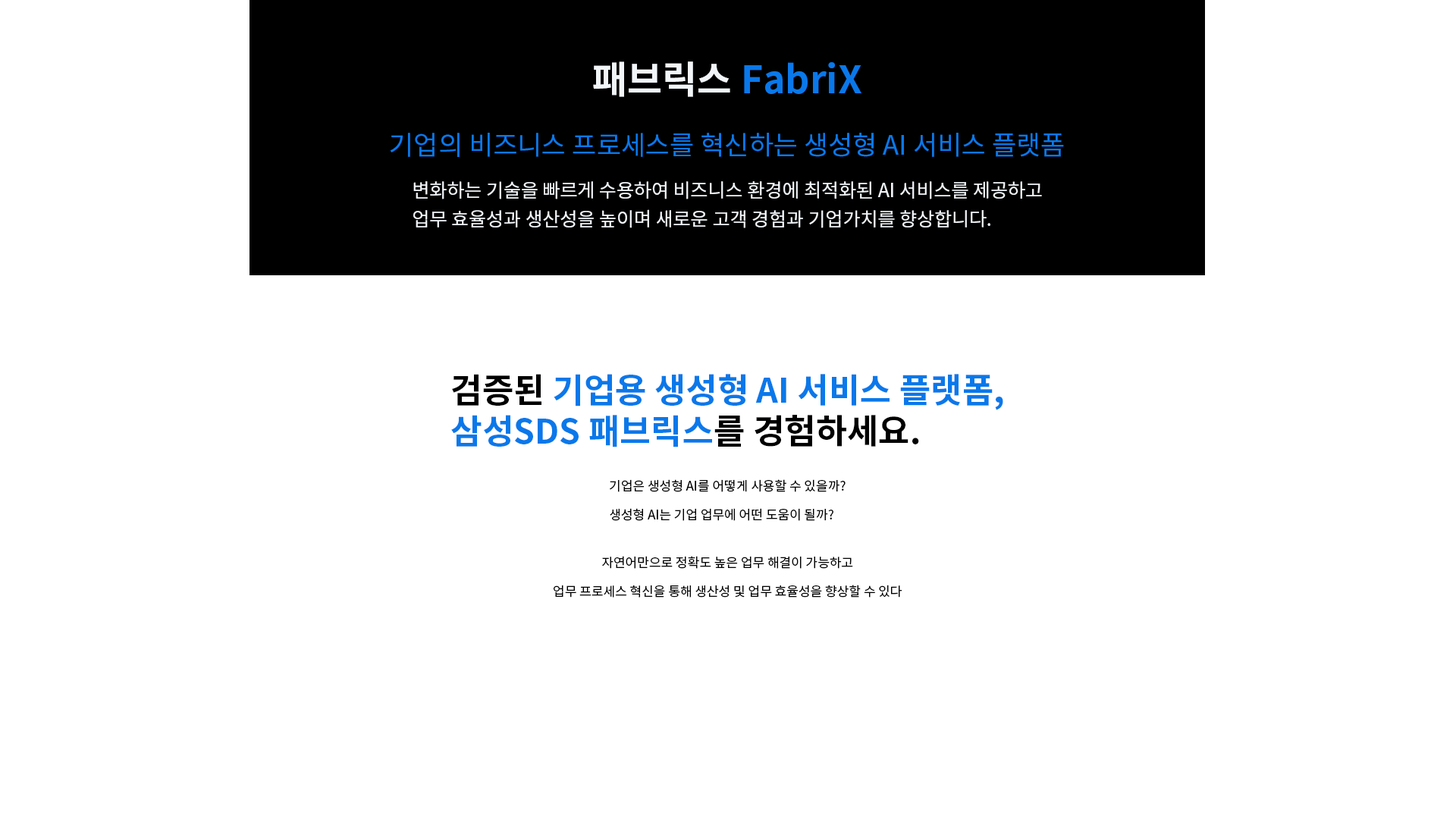
<style>
.page{position:relative;width:1456px;height:819px;background:#ffffff}
.page>*{position:absolute;margin:0}
.t1{font:37.9px "NotoSansKR-Bold";color:#0a78ea}
.t2{font:37.9px "NotoSansKR-Bold";color:#f2f6f9}
.t3{font:26.5px "NotoSansKR-Regular";color:#0a78ea}
.t4{font:19px/28.4px "NotoSansKR-Regular";color:#f2f6f9}
.t5{font:34.1px "NotoSansKR-Bold";color:#0a78ea}
.t6{font:34.1px "NotoSansKR-Bold";color:#000000}
.t7{font:12.9px/28.4px "NotoSansKR-Regular";color:#000000}
</style>
<div class="page">
<p class="t1" style="left:593px;top:61px;width:268px;height:36px"><span class="t2">패브릭스</span> FabriX</p>
<p class="t3" style="left:390px;top:133px;width:674px;height:24px">기업의 비즈니스 프로세스를 혁신하는 생성형 AI 서비스 플랫폼</p>
<p class="t4" style="left:413px;top:181px;width:629px;height:47px">변화하는 기술을 빠르게 수용하여 비즈니스 환경에 최적화된 AI 서비스를 제공하고<br>업무 효율성과 생산성을 높이며 새로운 고객 경험과 기업가치를 향상합니다.</p>
<p class="t5" style="left:451px;top:374px;width:552px;height:73px"><span class="t6">검증된 </span>기업용 생성형 AI 서비스 플랫폼, <br>삼성SDS 패브릭스<span class="t6">를 경험하세요.</span></p>
<p class="t7" style="left:610px;top:479px;width:236px;height:42px">기업은 생성형 AI를 어떻게 사용할 수 있을까?<br>생성형 AI는 기업 업무에 어떤 도움이 될까?</p>
<p class="t7" style="left:554px;top:556px;width:348px;height:42px;text-align:center">자연어만으로 정확도 높은 업무 해결이 가능하고<br>업무 프로세스 혁신을 통해 생산성 및 업무 효율성을 향상할 수 있다</p>
</div>
